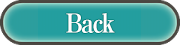
<style>
.page{position:relative;width:180px;height:45px}
.page>*{position:absolute;margin:0}
.t1{font:26px "RyuminPro-ExBold";letter-spacing:-0.08em;color:#ffffff;scale:0.9 1}
</style>
<div class="page">
<p class="t1" style="left:66px;top:13px;width:49px;height:20px">Back</p>
</div>
